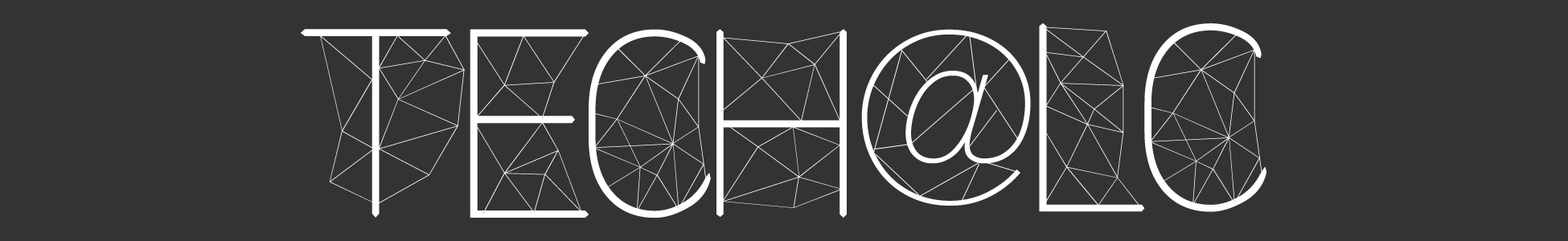
<style>
.page{position:relative;width:1568px;height:241px;background:#333333}
.page>*{position:absolute;margin:0}
.t1{font:188.4px "Amethyst";color:#ffffff}
.t2{font:235.4px "AvenirNext-UltraLight";color:#ffffff}
</style>
<div class="page">
<p class="t1" style="left:300px;top:29px;width:165px;height:189px">T</p>
<p class="t1" style="left:470px;top:29px;width:119px;height:189px">e</p>
<p class="t1" style="left:589px;top:29px;width:122px;height:189px">c</p>
<p class="t1" style="left:716px;top:29px;width:131px;height:189px">H</p>
<p class="t2" style="left:861px;top:29px;width:170px;height:177px">@</p>
<p class="t1" style="left:1039px;top:23px;width:106px;height:189px">L</p>
<p class="t1" style="left:1144px;top:23px;width:122px;height:189px">C</p>
</div>
